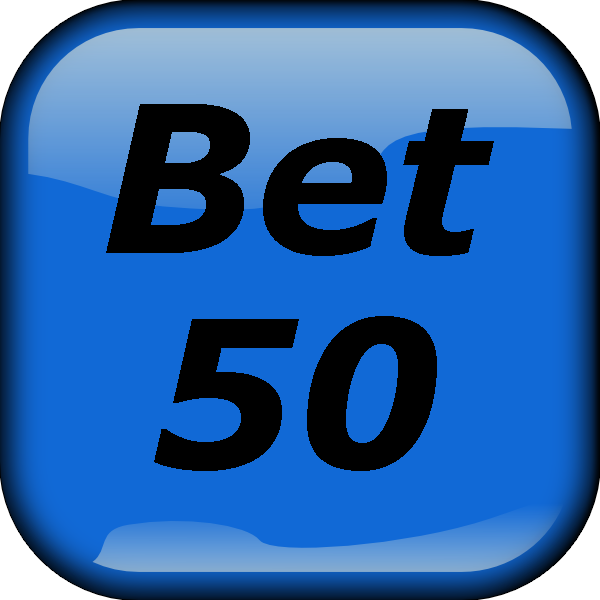
<style>
.page{position:relative;width:600px;height:600px;background:#1169d6}
.page>*{position:absolute;margin:0}
.t1{font:204.8px "Verdana-BoldItalic";color:#000000}
</style>
<div class="page">
<p class="t1" style="left:106px;top:104px;width:388px;height:152px">Bet</p>
<p class="t1" style="left:154px;top:316px;width:283px;height:155px">50</p>
</div>
